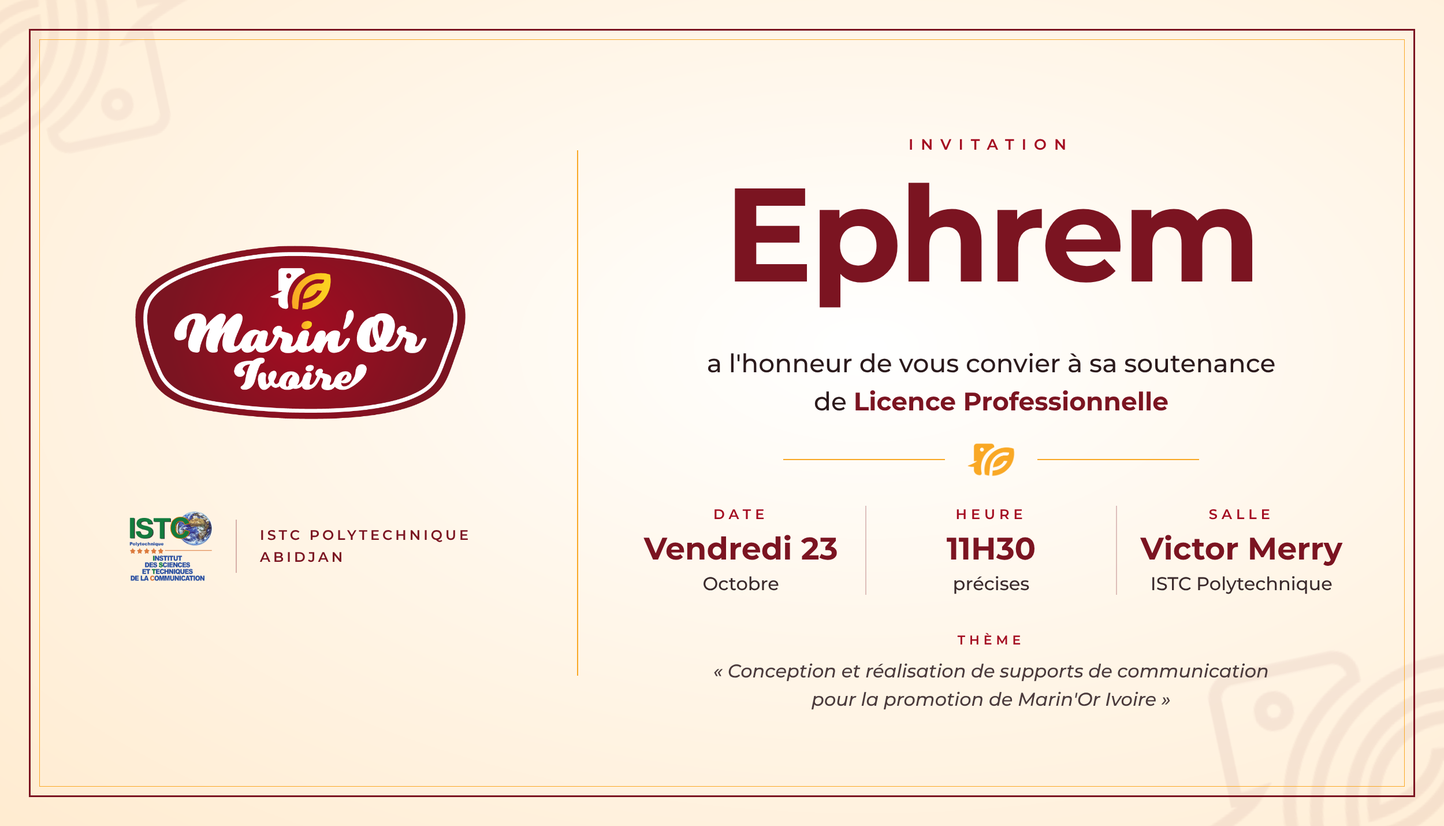
<style>
.page{position:relative;width:1444px;height:826px}
.page>*{position:absolute;margin:0}
.t1{font:15px "Montserrat-SemiBold";letter-spacing:0.5em;color:#a40c21}
.t2{font:132.9px "Montserrat-Bold";letter-spacing:-0.022em;color:#7b1421}
.t3{font:25.4px/38.1px "Montserrat-Medium";color:#2b1a1c}
.t4{font:25.4px/38.1px "Montserrat-Bold";color:#7b1421}
.t5{font:13.9px "Montserrat-SemiBold";letter-spacing:0.292em;color:#a40c21}
.t6{font:13.9px/22.2px "Montserrat-SemiBold";letter-spacing:0.208em;color:#7b1421}
.t7{font:31.2px "Montserrat-Bold";color:#7b1421}
.t8{font:18.5px "Montserrat-Medium";color:#3a2a2c}
.t9{font:12.7px "Montserrat-SemiBold";letter-spacing:0.318em;color:#a40c21}
.t10{font:18.5px/28.7px "Montserrat-MediumItalic";color:#4a3a3c}
</style>
<div class="page">
<p class="t1" style="left:910px;top:139px;width:155px;height:11px">INVITATION</p>
<p class="t2" style="left:735px;top:183px;width:518px;height:119px">Ephrem</p>
<p class="t3" style="left:708px;top:352px;width:567px;height:59px;text-align:center">a l'honneur de vous convier à sa soutenance<br>de <span class="t4">Licence Professionnelle</span></p>
<p class="t5" style="left:715px;top:509px;width:49px;height:10px">DATE</p>
<p class="t5" style="left:957px;top:509px;width:66px;height:10px">HEURE</p>
<p class="t5" style="left:1209px;top:509px;width:61px;height:10px">SALLE</p>
<p class="t6" style="left:259px;top:530px;width:209px;height:32px">ISTC POLYTECHNIQUE<br>ABIDJAN</p>
<p class="t7" style="left:644px;top:534px;width:193px;height:26px">Vendredi 23</p>
<p class="t7" style="left:947px;top:537px;width:88px;height:23px">11H30</p>
<p class="t7" style="left:1140px;top:534px;width:203px;height:32px">Victor Merry</p>
<p class="t8" style="left:704px;top:576px;width:75px;height:14px">Octobre</p>
<p class="t8" style="left:954px;top:575px;width:76px;height:19px">précises</p>
<p class="t8" style="left:1153px;top:575px;width:179px;height:19px">ISTC Polytechnique</p>
<p class="t9" style="left:957px;top:633px;width:64px;height:11px">THÈME</p>
<p class="t10" style="left:714px;top:663px;width:554px;height:46px;text-align:center">« Conception et réalisation de supports de communication<br>pour la promotion de Marin'Or Ivoire »</p>
</div>
